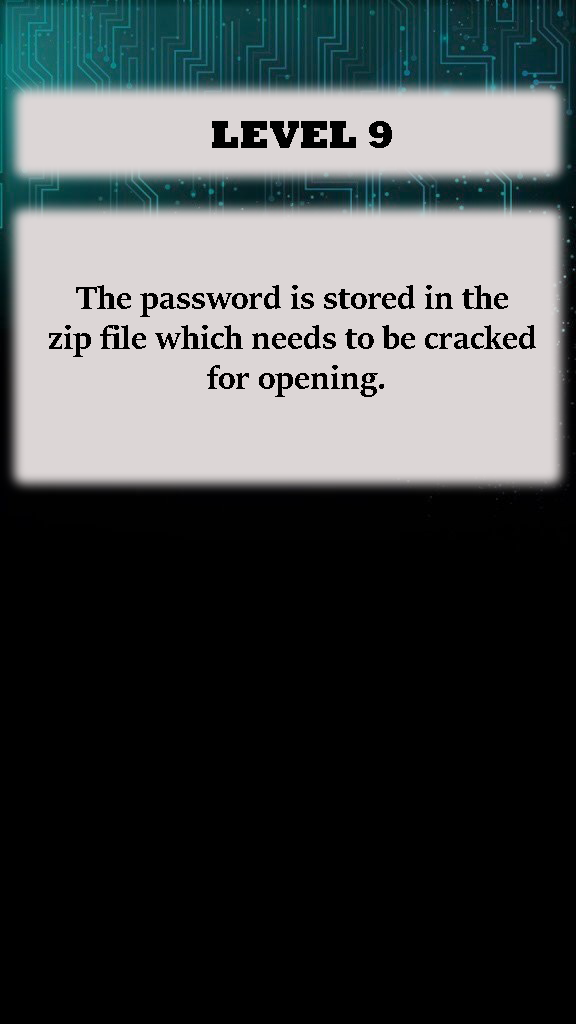
<style>
.page{position:relative;width:576px;height:1024px;background:#000000}
.page>*{position:absolute;margin:0}
.t1{font:40px "Rockwell-ExtraBold";color:#000000}
.t2{font:36px/10px "SitkaBanner-Bold";color:#000000}
</style>
<div class="page">
<p class="t1" style="left:212px;top:121px;width:180px;height:27px">LEVEL 9</p>
<p class="t2" style="left:49px;top:285px;width:487px;height:112px;text-align:center">The password is stored in the <br><br><br><br>zip file which needs to be cracked<br><br><br><br> for opening.</p>
</div>
